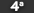
<style>
.page{position:relative;width:34px;height:13px;background:#333333}
.page>*{position:absolute;margin:0}
.t1{font:13.9px "K2D-ExtraBold";color:#ffffff}
</style>
<div class="page">
<p class="t1" style="left:10px;top:1px;width:14px;height:10px">4a</p>
</div>
